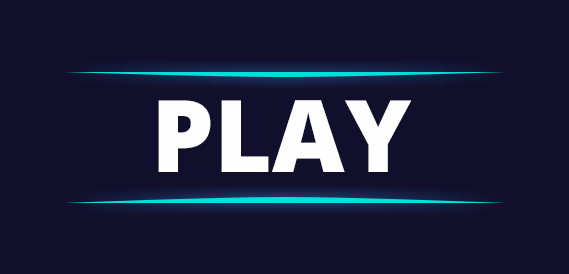
<style>
.page{position:relative;width:569px;height:274px;background:#110f2b}
.page>*{position:absolute;margin:0}
.t1{font:100px "OpenSans-Extrabold";color:#fefeff}
</style>
<div class="page">
<p class="t1" style="left:158px;top:100px;width:254px;height:72px">PLAY</p>
</div>
